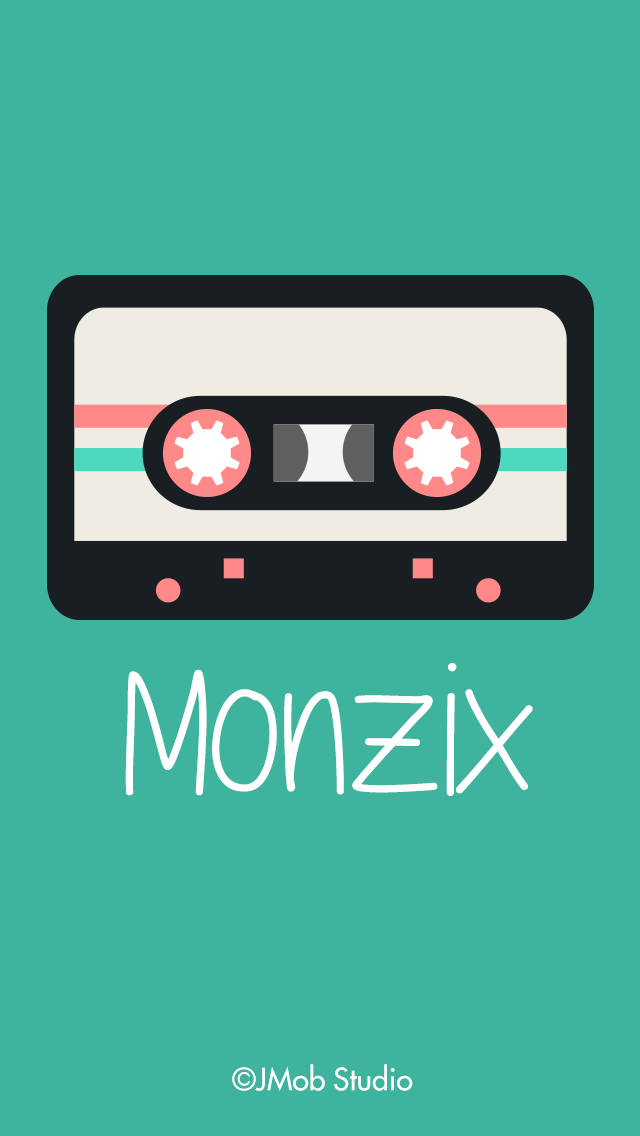
<style>
.page{position:relative;width:640px;height:1136px;background:#3eb49e}
.page>*{position:absolute;margin:0}
.t1{font:200px "SwaggerLight";color:#ffffff}
.t2{font:30px "VNF-Futura";color:#ffffff}
</style>
<div class="page">
<p class="t1" style="left:125px;top:663px;width:408px;height:133px">Monzix</p>
<p class="t2" style="left:232px;top:1064px;width:181px;height:27px">©JMob Studio</p>
</div>
